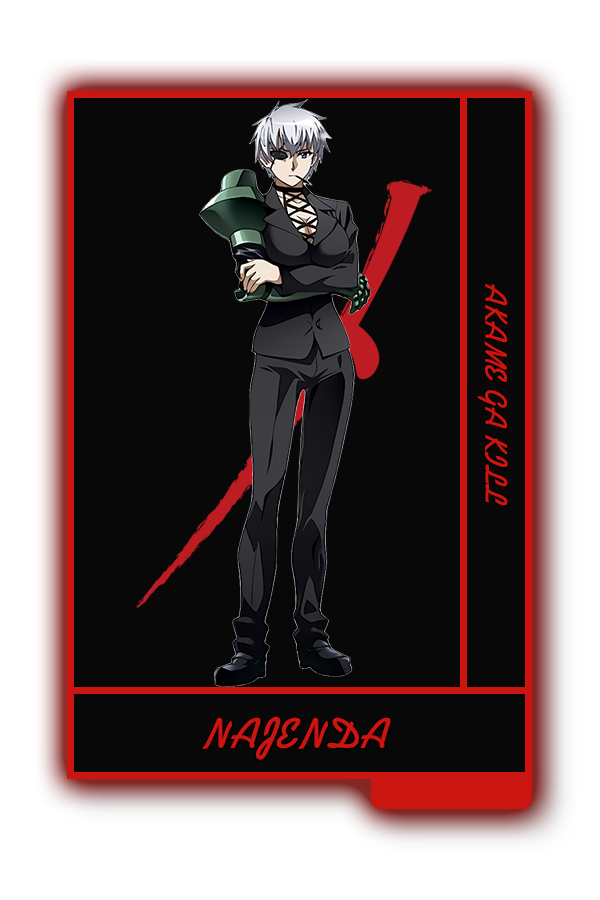
<style>
.page{position:relative;width:600px;height:900px;background:#080808}
.page>*{position:absolute;margin:0}
.t1{font:31.2px "Alako-Bold";color:#cb1511}
.t2{font:43.2px "Alako-Bold";color:#cb1511}
</style>
<div class="page">
<p class="t1" style="left:477px;top:283px;width:31px;height:223px;rotate:90deg">AKAME GA KILL</p>
<p class="t2" style="left:202px;top:716px;width:189px;height:44px">NAJENDA</p>
</div>
